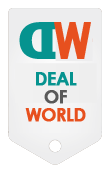
<style>
.page{position:relative;width:109px;height:175px;background:#ffffff}
.page>*{position:absolute;margin:0}
.t1{font:50px "CenturyGothic-Bold";letter-spacing:-0.05em;color:#e7501e;text-transform:uppercase;font-weight:bold;scale:0.84 1}
.t2{font:18px/18px "CenturyGothic-Bold";letter-spacing:-0.05em;color:#e7501e;text-transform:uppercase;font-weight:bold}
.t3{font:18px/18px "CenturyGothic-Bold";letter-spacing:-0.05em;color:#06938f;text-transform:uppercase;font-weight:bold}
.t4{font:18px/18px "CenturyGothic-Bold";letter-spacing:-0.05em;color:#595959;text-transform:uppercase;font-weight:bold}
</style>
<div class="page">
<p class="t1" style="left:54px;top:22px;width:37px;height:37px">W</p>
<p class="t2" style="left:25px;top:72px;width:61px;height:50px;text-align:center"><span class="t3">deal<br></span><span class="t4">of<br></span>world</p>
</div>
